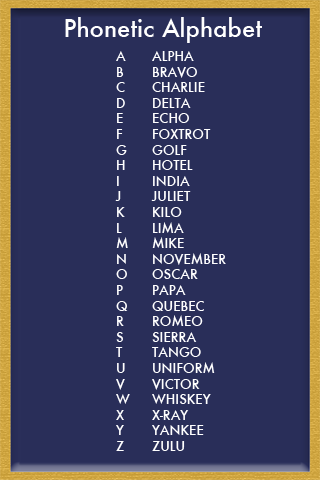
<style>
.page{position:relative;width:320px;height:480px;background:#292e59}
.page>*{position:absolute;margin:0}
.t1{font:24px "Futura-Medium";color:#ffffff}
.t2{font:13px "Futura-Medium";color:#ffffff}
</style>
<div class="page">
<p class="t1" style="left:65px;top:17px;width:197px;height:26px">Phonetic Alphabet</p>
<p class="t2" style="left:115px;top:51px;width:111px;height:400px">A ALPHA<br>B BRAVO<br>C CHARLIE<br>D DELTA<br>E ECHO<br>F FOXTROT<br>G GOLF<br>H HOTEL<br>I INDIA<br>J JULIET<br>K KILO<br>L LIMA<br>M MIKE<br>N NOVEMBER<br>O OSCAR<br>P PAPA<br>Q QUEBEC<br>R ROMEO<br>S SIERRA<br>T TANGO<br>U UNIFORM<br>V VICTOR<br>W WHISKEY<br>X X-RAY<br>Y YANKEE<br>Z ZULU</p>
</div>
